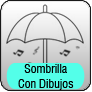
<style>
.page{position:relative;width:92px;height:92px}
.page>*{position:absolute;margin:0}
.t1{font:12px "Swiss721BT-RomanCondensed";color:#000000}
</style>
<div class="page">
<p class="t1" style="left:18px;top:64px;width:56px;height:26px;text-align:center">Sombrilla<br>Con Dibujos</p>
</div>
